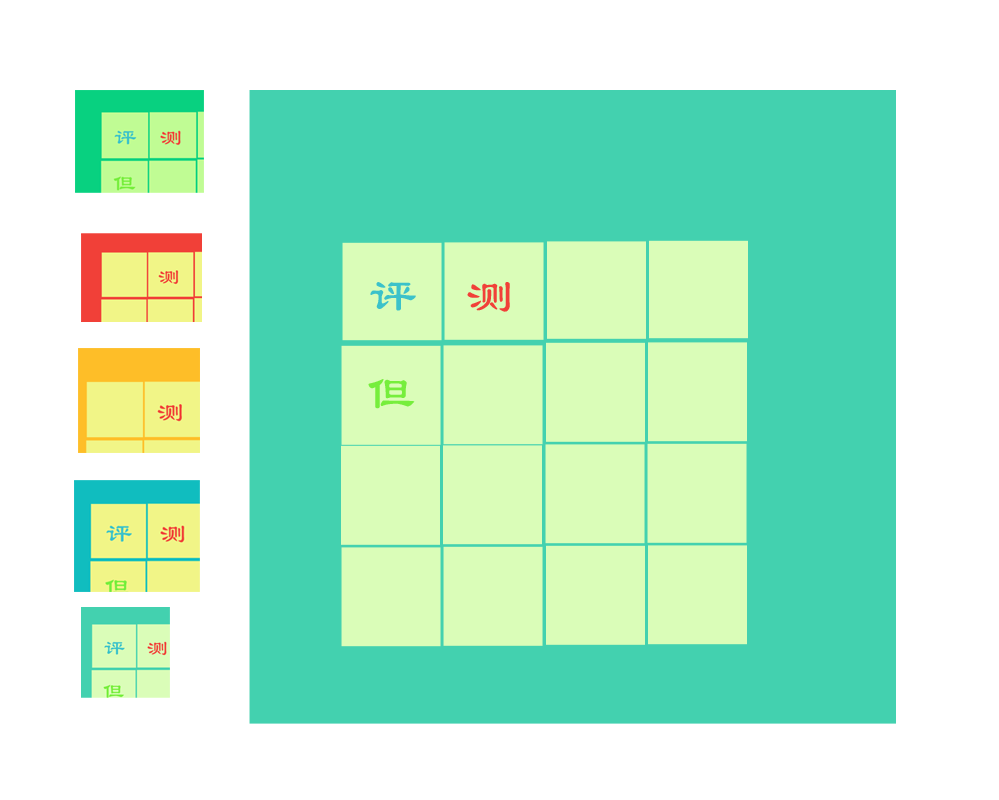
<style>
.page{position:relative;width:999px;height:800px;background:#ffffff}
.page>*{position:absolute;margin:0}
.t1{font:48px "LiSu";color:#3bc2ca}
.t2{font:48px "LiSu";color:#f14038}
.t3{font:48px "LiSu";color:#76ee3c}
</style>
<div class="page">
<p class="t1" style="left:370px;top:282px;width:46px;height:29px">评</p>
<p class="t2" style="left:467px;top:282px;width:43px;height:30px">测</p>
<p class="t3" style="left:368px;top:379px;width:47px;height:30px">但</p>
</div>
